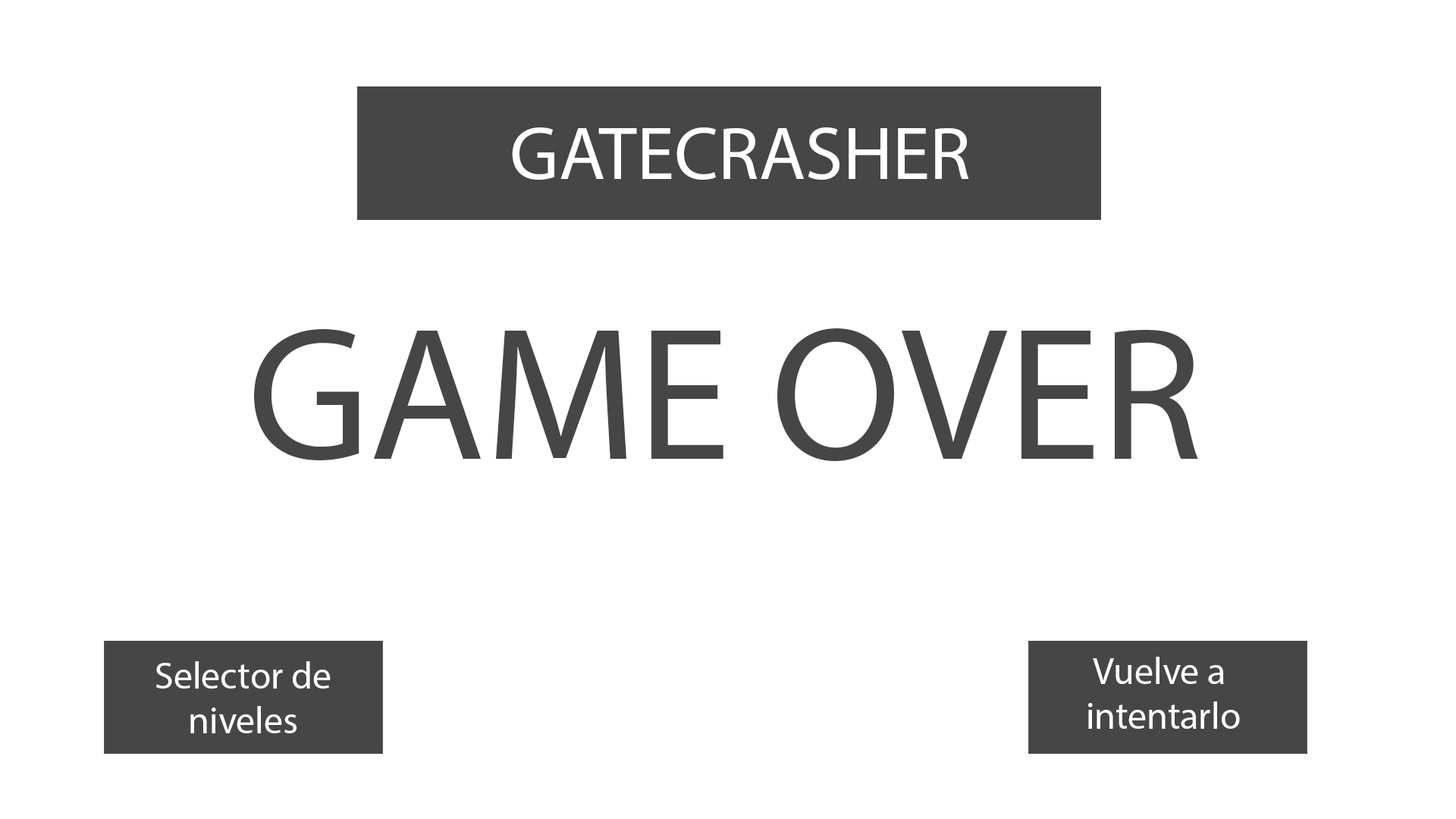
<style>
.page{position:relative;width:1456px;height:819px;background:#ffffff}
.page>*{position:absolute;margin:0}
.t1{font:75.8px "MyriadPro-Regular";color:#ffffff}
.t2{font:189.6px "MyriadPro-Regular";color:#464646}
.t3{font:9.1px "MyriadPro-Regular";color:#ffffff}
</style>
<div class="page">
<p class="t1" style="left:512px;top:127px;width:457px;height:53px">GATECRASHER</p>
<p class="t2" style="left:254px;top:328px;width:944px;height:133px">GAME OVER</p>
<p class="t3" style="left:155px;top:661px;width:176px;height:72px;text-align:center">Selector de<br>niveles</p>
<p class="t3" style="left:1088px;top:657px;width:152px;height:72px;text-align:center">Vuelve a<br> intentarlo</p>
</div>
